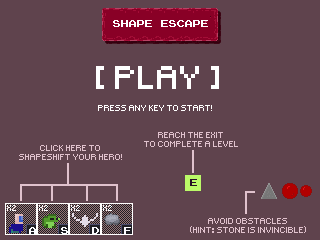
<style>
.page{position:relative;width:320px;height:240px;background:#5f434d}
.page>*{position:absolute;margin:0}
.t1{font:8px "PressStart2P";color:#ffffff}
.t2{font:30px "Small-Pixel";color:#ffffff}
.t3{font:8px "Small-Pixel";color:#ffffff}
.t4{font:8px "Small-Pixel";color:#e0c2cd}
</style>
<div class="page">
<p class="t1" style="left:113px;top:20px;width:95px;height:7px">SHAPE ESCAPE</p>
<p class="t2" style="left:96px;top:66px;width:123px;height:23px">[ PLAY ]</p>
<p class="t3" style="left:98px;top:105px;width:114px;height:6px">PRESS ANY KEY TO START!</p>
<p class="t4" style="left:144px;top:132px;width:94px;height:15px;text-align:center">Reach the exit<br>to Complete a level</p>
<p class="t4" style="left:19px;top:145px;width:103px;height:15px;text-align:center">Click here to <br>shapeshift your hero!</p>
<p class="t4" style="left:190px;top:218px;width:116px;height:15px;text-align:center">AVOID OBSTACLES<br>(HINT: STONE IS INVINCIBLE)</p>
</div>
